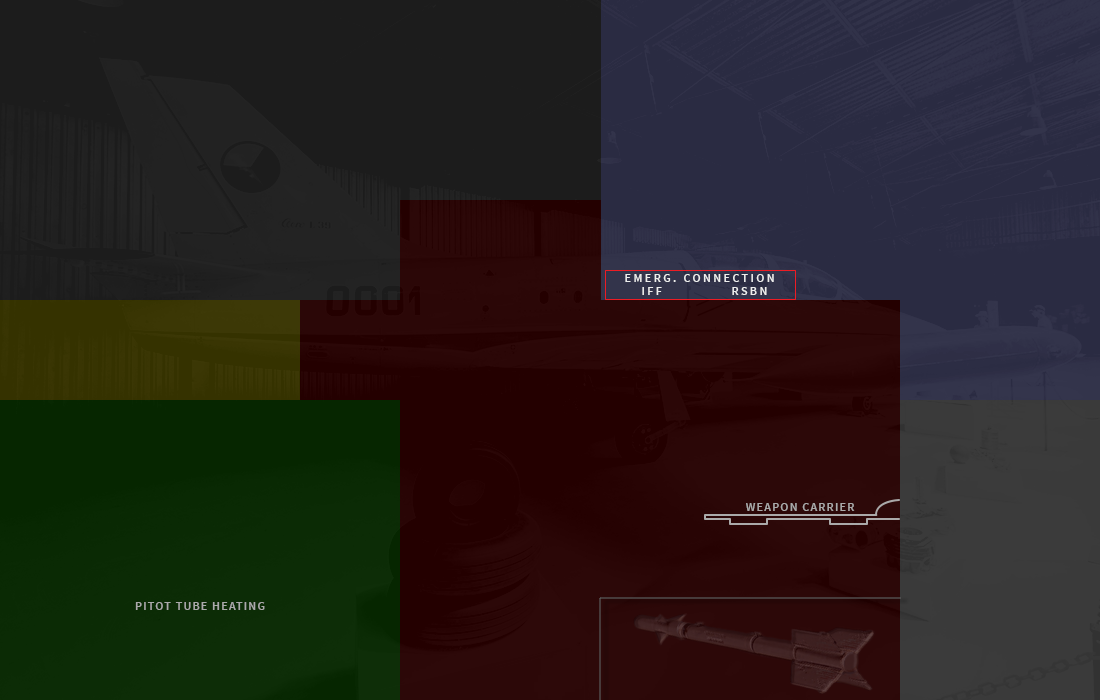
<style>
.page{position:relative;width:1100px;height:700px}
.page>*{position:absolute;margin:0}
.t1{font:12px/13px "SourceSansPro-SemiBold";letter-spacing:0.2em;color:#eeeeee}
.t2{font:12px "SourceSansPro-SemiBold";letter-spacing:0.1em;color:#aaaaaa}
</style>
<div class="page">
<p class="t1" style="left:625px;top:274px;width:149px;height:21px;text-align:center">EMERG. CONNECTION<br>  IFF              RSBN</p>
<p class="t2" style="left:746px;top:503px;width:109px;height:8px">WEAPON CARRIER</p>
<p class="t2" style="left:135px;top:602px;width:130px;height:8px">PITOT TUBE HEATING</p>
</div>
